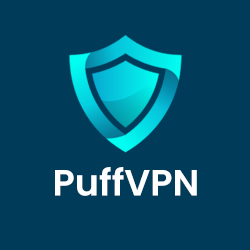
<style>
.page{position:relative;width:250px;height:250px;background:#003c59}
.page>*{position:absolute;margin:0}
.t1{font:36.6px "Poppins-SemiBold";color:#ffffff}
</style>
<div class="page">
<p class="t1" style="left:55px;top:167px;width:142px;height:29px">PuffVPN</p>
</div>
